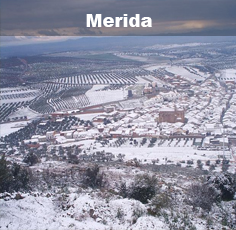
<style>
.page{position:relative;width:236px;height:230px}
.page>*{position:absolute;margin:0}
.t1{font:18px "Arial-Black";color:#ffffff}
</style>
<div class="page">
<p class="t1" style="left:86px;top:14px;width:66px;height:13px">Merida</p>
</div>
